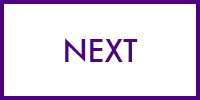
<style>
.page{position:relative;width:200px;height:100px;background:#ffffff}
.page>*{position:absolute;margin:0}
.t1{font:30px "Futura-Medium";color:#4c0282}
</style>
<div class="page">
<p class="t1" style="left:65px;top:38px;width:73px;height:24px">NEXT</p>
</div>
